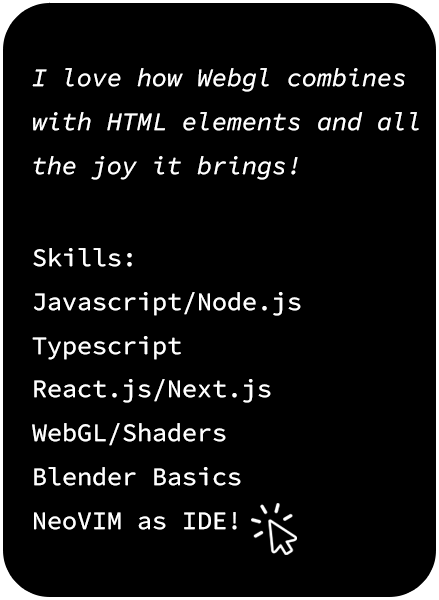
<style>
.page{position:relative;width:439px;height:600px;background:#000000}
.page>*{position:absolute;margin:0}
.t1{font:25px "SourceCodePro-Regular";color:#ffffff}
</style>
<div class="page">
<p class="t1" style="left:32px;top:68px;width:387px;height:112px">I love how Webgl combines<br>with HTML elements and all<br>the joy it brings!</p>
<p class="t1" style="left:32px;top:248px;width:269px;height:282px">Skills:<br>Javascript/Node.js<br>Typescript<br>React.js/Next.js<br>WebGL/Shaders<br>Blender Basics<br>NeoVIM as IDE!</p>
</div>
